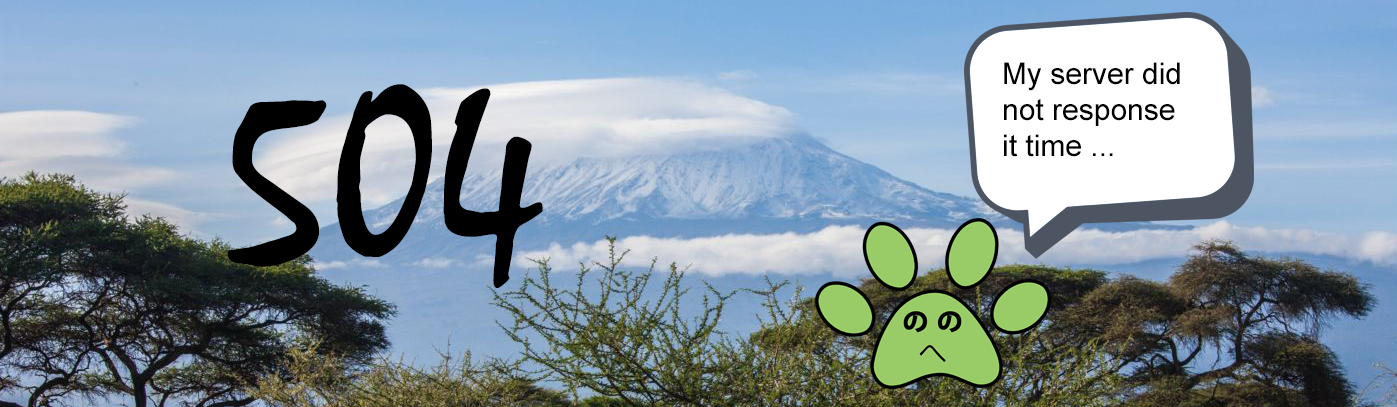
<style>
.page{position:relative;width:1397px;height:407px}
.page>*{position:absolute;margin:0}
.t1{font:30px "ArialMT";color:#000000}
.t2{font:250px "Mistral";color:#000000}
</style>
<div class="page">
<p class="t1" style="left:1004px;top:62px;width:176px;height:95px">My server did<br>not response <br>it time ...</p>
<p class="t2" style="left:228px;top:84px;width:315px;height:204px">504</p>
</div>
